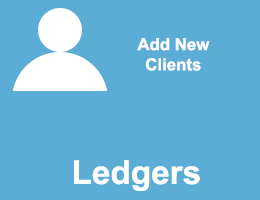
<style>
.page{position:relative;width:260px;height:200px;background:#5cadd6}
.page>*{position:absolute;margin:0}
.t1{font:16.8px "Arial-BoldMT";color:#ffffff}
.t2{font:33.3px "Arial-BoldMT";color:#ffffff}
</style>
<div class="page">
<p class="t1" style="left:137px;top:38px;width:73px;height:33px;text-align:center">Add New<br>Clients</p>
<p class="t2" style="left:74px;top:160px;width:126px;height:31px">Ledgers</p>
</div>
